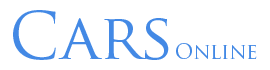
<style>
.page{position:relative;width:270px;height:70px;background:#ffffff}
.page>*{position:absolute;margin:0}
.t1{font:21.1px "TrajanPro-Regular";color:#4389e5}
.t2{font:63.4px "TrajanPro-Regular";color:#4389e5}
</style>
<div class="page">
<p class="t1" style="left:13px;top:10px;width:244px;height:50px"><span class="t2">Cars</span>Online</p>
</div>
